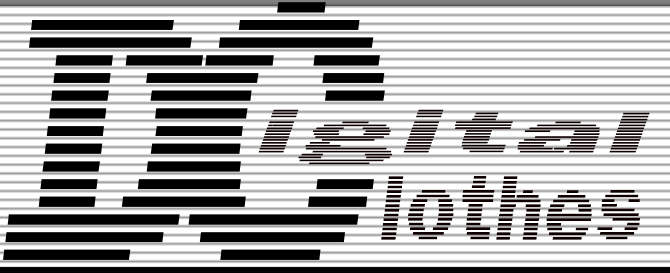
<style>
.page{position:relative;width:670px;height:273px;background:#ffffff}
.page>*{position:absolute;margin:0}
.t1{font:62.5px "LinearBeam05";color:#100101;scale:2.25 1}
.t2{font:100px "LinearBeam05";color:#100101;scale:0.77 1}
</style>
<div class="page">
<p class="t1" style="left:258px;top:109px;width:392px;height:56px">igital</p>
<p class="t2" style="left:381px;top:176px;width:259px;height:64px">lothes</p>
</div>
